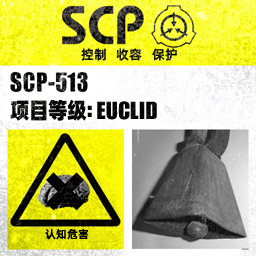
<style>
.page{position:relative;width:256px;height:256px}
.page>*{position:absolute;margin:0}
.t1{font:13px "AlibabaPuHuiTiM"}
.t2{font:26px "URWImpactW01-Bold";letter-spacing:0.02em;color:#000000}
.t3{font:22px "AlibabaPuHuiTiH";letter-spacing:-0.02em;color:#000000;scale:0.9 1}
.t4{font:22px "AlibabaPuHuiTiH";color:#000000;scale:0.9 1}
.t5{font:31px "URWImpactW01-Bold";color:#000000}
.t6{font:11px "AlibabaPuHuiTiM";letter-spacing:0.02em;color:#000000}
</style>
<div class="page">
<p class="t1" style="left:81px;top:48px;width:96px;height:13px">控制   收容   保护</p>
<p class="t2" style="left:10px;top:99px;width:147px;height:22px"><span class="t3">项目等</span><span class="t4">级</span><span class="t5">: </span>EUCLID</p>
<p class="t6" style="left:45px;top:229px;width:44px;height:11px">认知危害</p>
</div>
